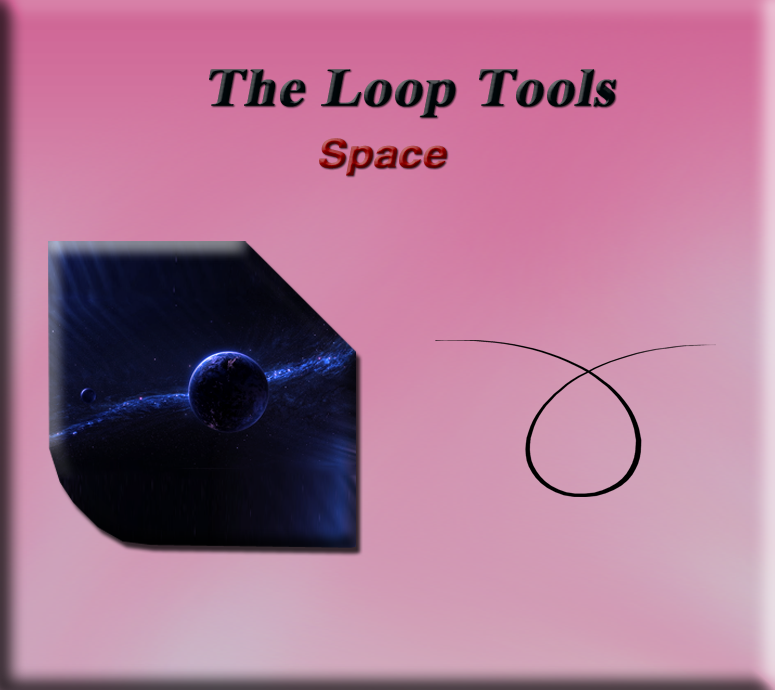
<style>
.page{position:relative;width:775px;height:690px}
.page>*{position:absolute;margin:0}
.t1{font:53.9px "TimesNewRomanPS-BoldMT";color:#000609;font-weight:bold;font-style:italic;scale:1.08 1}
.t2{font:39.1px "HelveticaLTStd-Bold";font-weight:bold;font-style:italic;scale:1.08 1}
.t3{font:53.9px "TimesNewRomanPS-BoldMT";font-weight:bold;font-style:italic;scale:1.08 1}
</style>
<div class="page">
<p class="t1" style="left:209px;top:69px;width:407px;height:49px">The Loop Tools</p>
<p class="t2" style="left:319px;top:138px;width:128px;height:38px"><span class="t3"> </span>Space</p>
</div>
